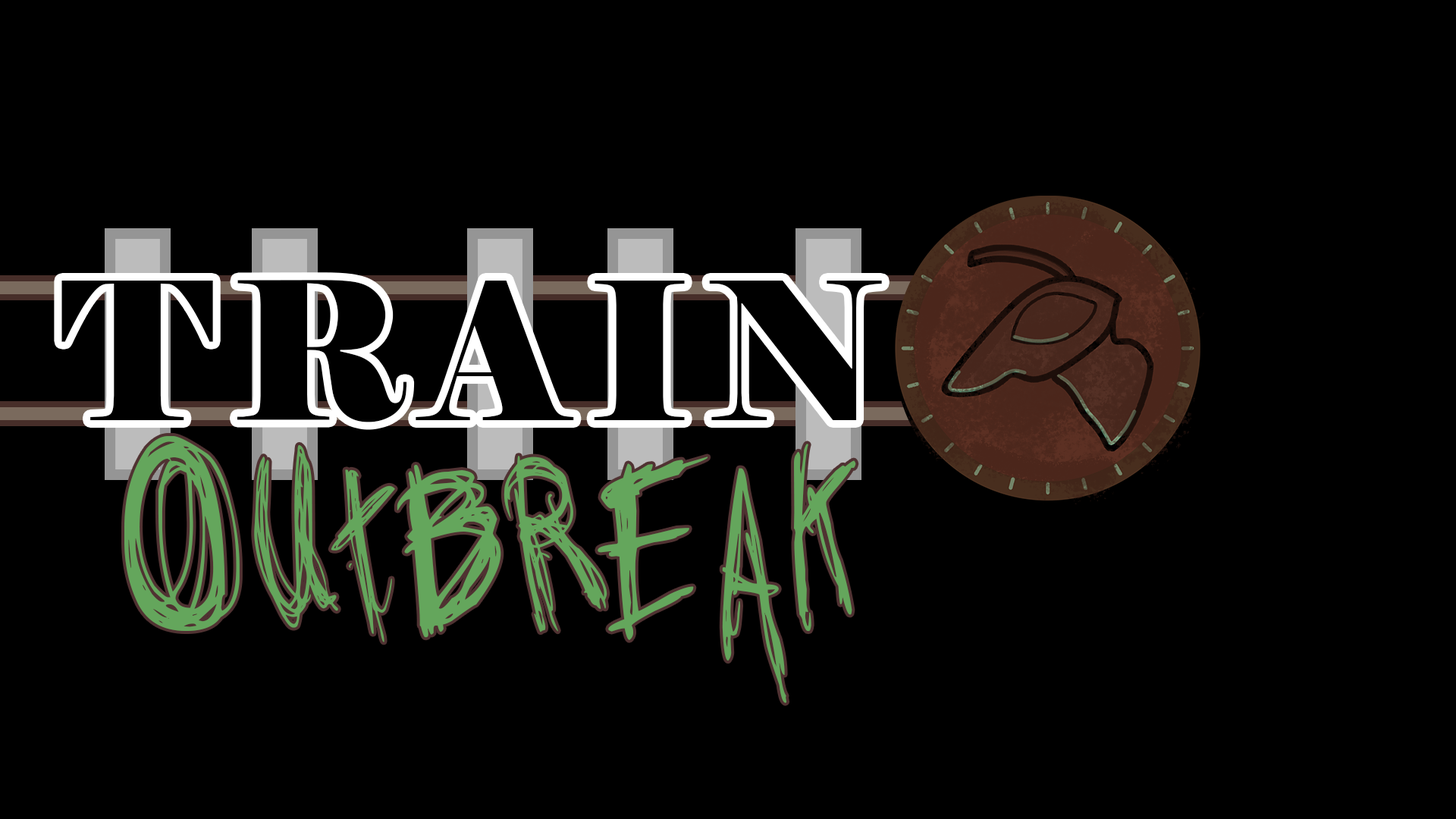
<style>
.page{position:relative;width:1456px;height:819px;background:#000000}
.page>*{position:absolute;margin:0}
.t1{font:191.2px "Elephant-Regular";letter-spacing:0.1em;color:#000000}
.t2{font:191.2px "Jo_wrote_a_lovesong";letter-spacing:0.1em;color:#64a65c}
.t3{font:236.1px "Jo_wrote_a_lovesong";letter-spacing:0.005em;color:#64a65c}
</style>
<div class="page">
<p class="t1" style="left:61px;top:280px;width:821px;height:142px">TRAIN</p>
<p class="t2" style="left:124px;top:436px;width:732px;height:267px"><span class="t3">o</span>utbreak</p>
</div>
